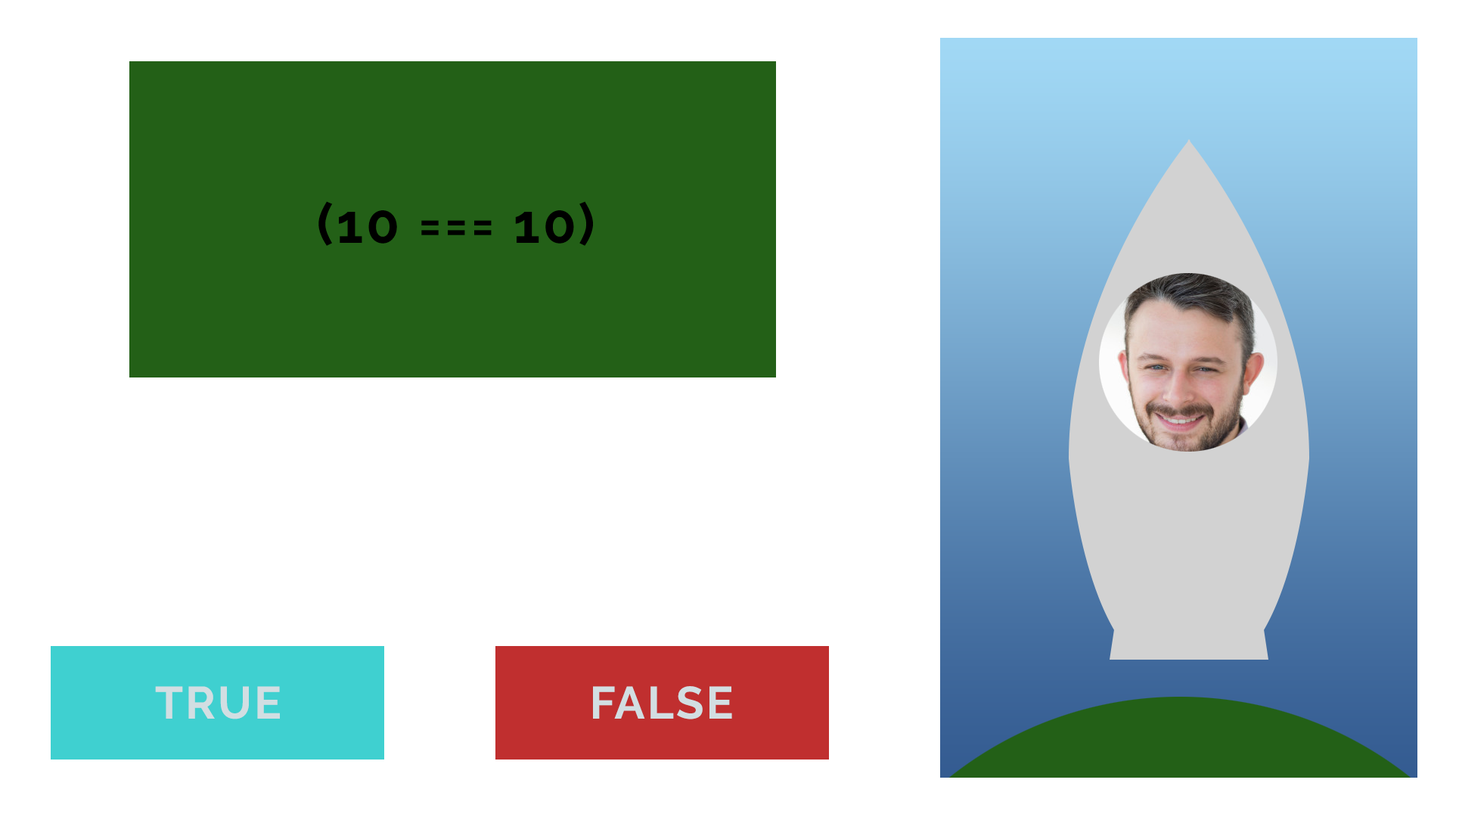
<style>
.page{position:relative;width:1459px;height:817px;background:#ffffff}
.page>*{position:absolute;margin:0}
.t1{font:54.5px "Raleway-Bold";letter-spacing:0.05em;color:#000000}
.t2{font:45.4px "Raleway-Bold";letter-spacing:0.05em;color:#d2dee2}
</style>
<div class="page">
<p class="t1" style="left:319px;top:201px;width:274px;height:45px">(10 === 10)</p>
<p class="t2" style="left:155px;top:686px;width:125px;height:33px">TRUE</p>
<p class="t2" style="left:593px;top:686px;width:139px;height:33px">FALSE</p>
</div>
